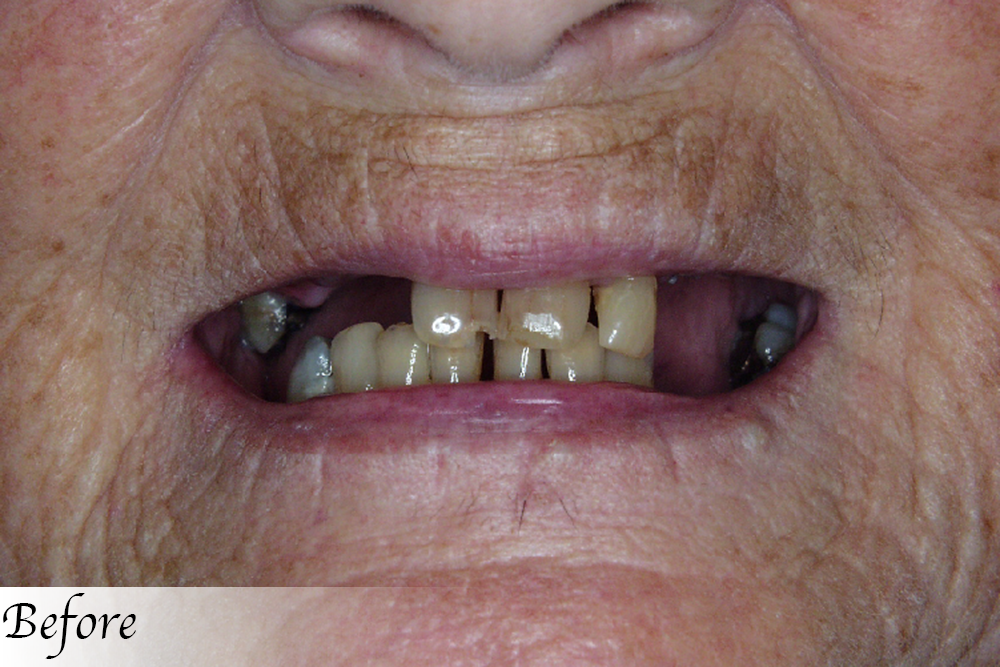
<style>
.page{position:relative;width:1000px;height:667px}
.page>*{position:absolute;margin:0}
.t1{font:90px "Apple-Chancery";color:#000000}
</style>
<div class="page">
<p class="t1" style="left:3px;top:593px;width:133px;height:66px">Before</p>
</div>
